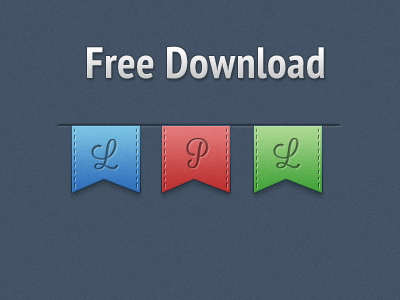
<style>
.page{position:relative;width:400px;height:300px}
.page>*{position:absolute;margin:0}
.t1{font:44px "PTSans-NarrowBold";letter-spacing:0.01em;color:#e0e0e0}
.t2{font:27px "Lavanderia-Sturdy";letter-spacing:0.01em;color:#2f5371}
.t3{font:27px "Lavanderia-Sturdy";letter-spacing:0.01em}
.t4{font:27px "Lavanderia-Sturdy";letter-spacing:0.01em;color:#446839}
</style>
<div class="page">
<p class="t1" style="left:87px;top:46px;width:237px;height:33px">Free Download</p>
<p class="t2" style="left:91px;top:139px;width:28px;height:31px">L</p>
<p class="t3" style="left:186px;top:138px;width:23px;height:31px">P</p>
<p class="t4" style="left:273px;top:138px;width:28px;height:31px">L</p>
</div>
